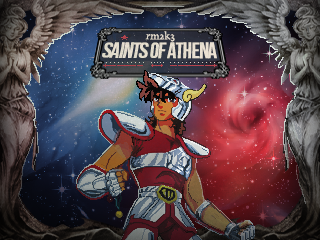
<style>
.page{position:relative;width:320px;height:240px}
.page>*{position:absolute;margin:0}
.t1{font:10px "Edita-Book";color:#ece2d4}
.t2{font:23.1px "BebasNeue";letter-spacing:-0.04em;color:#ece2d4}
</style>
<div class="page">
<p class="t1" style="left:145px;top:31px;width:30px;height:11px">rm2k3</p>
<p class="t2" style="left:102px;top:42px;width:115px;height:17px">saints of Athena</p>
</div>
